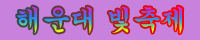
<style>
.page{position:relative;width:200px;height:40px;background:#c881dc}
.page>*{position:absolute;margin:0}
.t1{font:28px "H2gsrB";letter-spacing:-0.025em}
</style>
<div class="page">
<p class="t1" style="left:17px;top:6px;width:166px;height:28px">해운대 빛축제</p>
</div>
